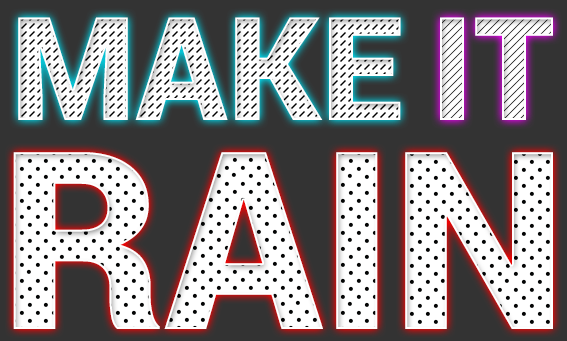
<style>
.page{position:relative;width:567px;height:341px;background:#333333}
.page>*{position:absolute;margin:0}
.t1{font:144px "Roboto-Black";color:#ffffff}
.t2{font:144px "Roboto-Black"}
.t3{font:248.5px "Roboto-Black";color:#ffffff}
</style>
<div class="page">
<p class="t1" style="left:18px;top:17px;width:110px;height:103px">M</p>
<p class="t1" style="left:135px;top:17px;width:93px;height:103px">A</p>
<p class="t1" style="left:235px;top:17px;width:88px;height:103px">K</p>
<p class="t1" style="left:329px;top:17px;width:72px;height:103px">E</p>
<p class="t2" style="left:475px;top:17px;width:78px;height:103px">T</p>
<p class="t3" style="left:13px;top:152px;width:147px;height:177px">R</p>
<p class="t3" style="left:164px;top:152px;width:159px;height:177px">A</p>
<p class="t3" style="left:405px;top:152px;width:148px;height:177px">N</p>
</div>
